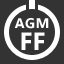
<style>
.page{position:relative;width:64px;height:64px;background:#333333}
.page>*{position:absolute;margin:0}
.t1{font:14.1px "SegoeUI-Bold";color:#ffffff}
.t2{font:25.1px "SegoeUI-Bold";color:#ffffff}
</style>
<div class="page">
<p class="t1" style="left:14px;top:18px;width:35px;height:11px">AGM</p>
<p class="t2" style="left:21px;top:32px;width:24px;height:18px">FF</p>
</div>
